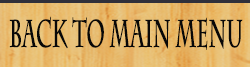
<style>
.page{position:relative;width:250px;height:67px}
.page>*{position:absolute;margin:0}
.t1{font:38.5px "CharlemagneStd-Bold";color:#080808;scale:0.51 1}
</style>
<div class="page">
<p class="t1" style="left:9px;top:16px;width:234px;height:34px">BACK TO MAIN MENU</p>
</div>
